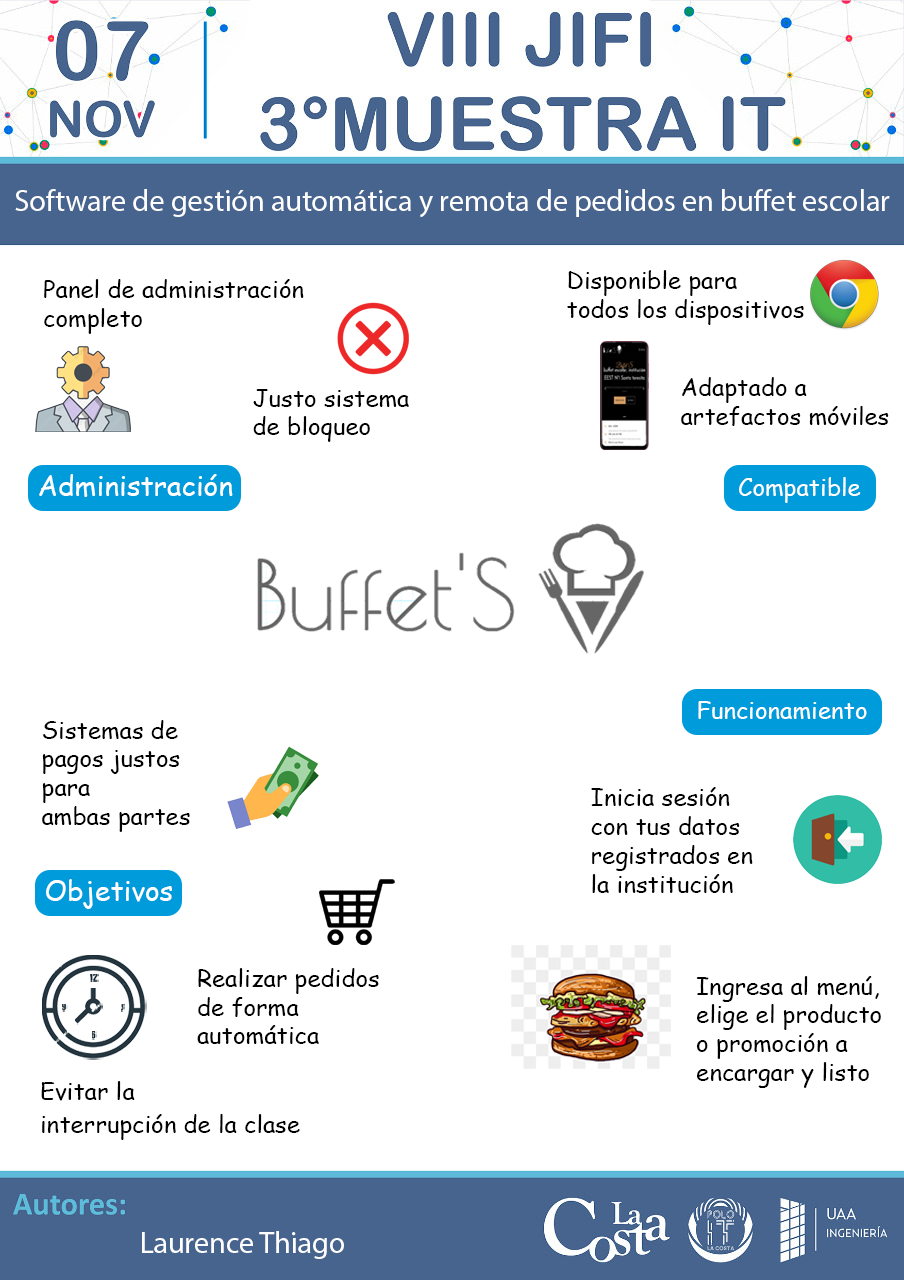
<style>
.page{position:relative;width:904px;height:1280px;background:#ffffff}
.page>*{position:absolute;margin:0}
.t1{font:30px "MyriadPro-Regular";color:#fffefe}
.t2{font:24px "ComicSansMS";color:#000000}
.t3{font:28px "ComicSansMS";color:#ffffff}
.t4{font:24px "ComicSansMS";color:#ffffff}
</style>
<div class="page">
<p class="t1" style="left:15px;top:189px;width:875px;height:29px">Software de gestión automática y remota de pedidos en buffet escolar</p>
<p class="t2" style="left:567px;top:270px;width:237px;height:55px">Disponible para<br>todos los dispositivos</p>
<p class="t2" style="left:44px;top:279px;width:260px;height:55px">Panel de administración<br>completo</p>
<p class="t2" style="left:681px;top:377px;width:208px;height:49px">Adaptado a <br>artefactos móviles</p>
<p class="t2" style="left:253px;top:389px;width:156px;height:53px">Justo sistema<br>de bloqueo</p>
<p class="t3" style="left:39px;top:474px;width:194px;height:23px">Administración</p>
<p class="t4" style="left:739px;top:477px;width:122px;height:26px">Compatible</p>
<p class="t4" style="left:698px;top:701px;width:169px;height:18px">Funcionamiento</p>
<p class="t2" style="left:42px;top:720px;width:148px;height:112px">Sistemas de <br>pagos justos<br>para <br>ambas partes</p>
<p class="t2" style="left:591px;top:787px;width:162px;height:106px">Inicia sesión <br>con tus datos<br>registrados en<br>la institución</p>
<p class="t3" style="left:46px;top:879px;width:126px;height:30px">Objetivos</p>
<p class="t2" style="left:197px;top:968px;width:182px;height:76px">Realizar pedidos <br>de forma <br>automática</p>
<p class="t2" style="left:696px;top:976px;width:185px;height:112px">Ingresa al menú,<br>elige el producto <br>o promoción a <br>encargar y listo</p>
<p class="t2" style="left:41px;top:1081px;width:259px;height:59px">Evitar la <br>interrupción de la clase</p>
<p class="t1" style="left:142px;top:1231px;width:202px;height:28px">Laurence Thiago</p>
</div>
